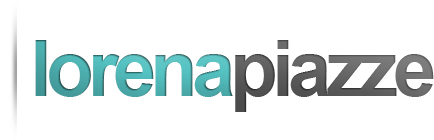
<style>
.page{position:relative;width:434px;height:140px;background:#ffffff}
.page>*{position:absolute;margin:0}
.t1{font:77.8px "Arial-BoldMT";letter-spacing:-0.075em;color:#55c2c2}
.t2{font:77.8px "Arial-BoldMT";letter-spacing:-0.075em;color:#595959}
</style>
<div class="page">
<p class="t1" style="left:35px;top:40px;width:399px;height:72px">lorena<span class="t2">piazze</span></p>
</div>
